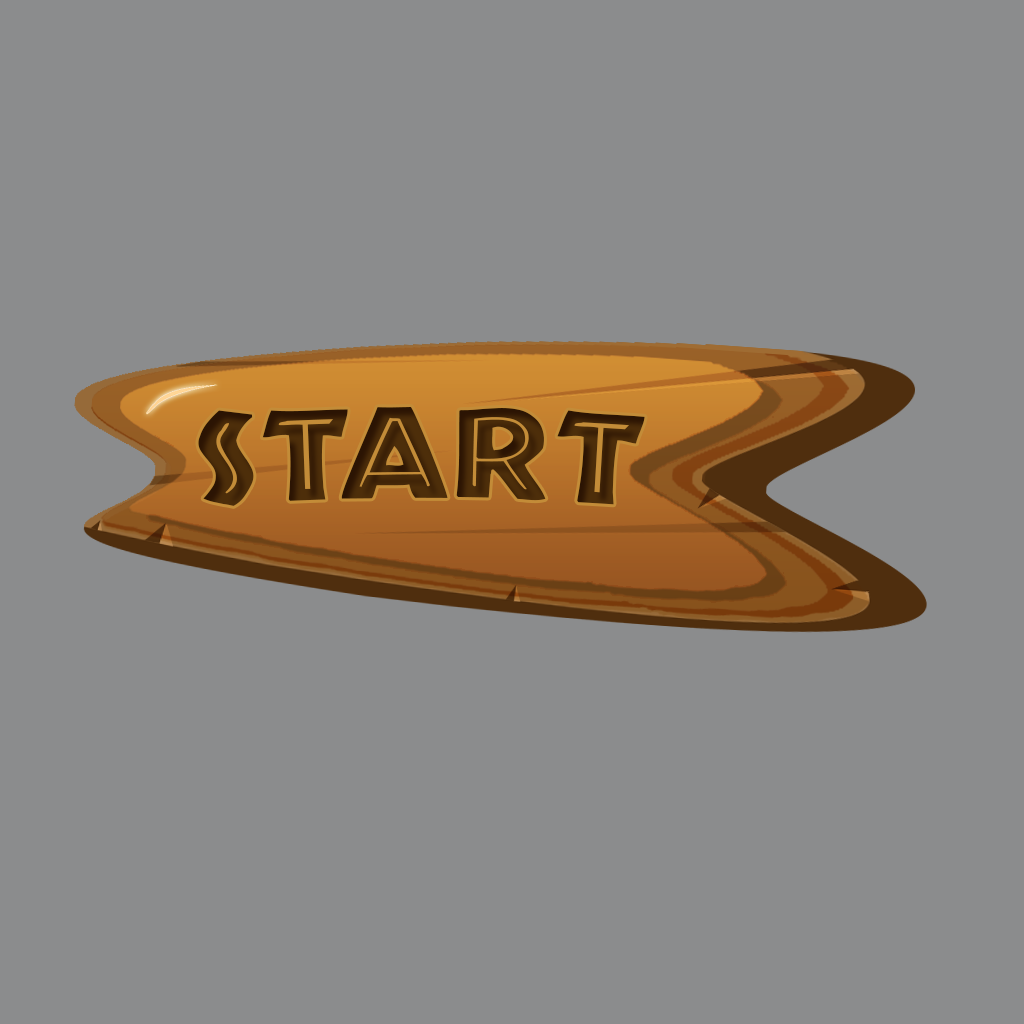
<style>
.page{position:relative;width:1024px;height:1024px;background:#8b8c8d}
.page>*{position:absolute;margin:0}
.t1{font:120px "African";color:#53320b;font-variant:small-caps}
</style>
<div class="page">
<p class="t1" style="left:198px;top:407px;width:447px;height:99px">START</p>
</div>
